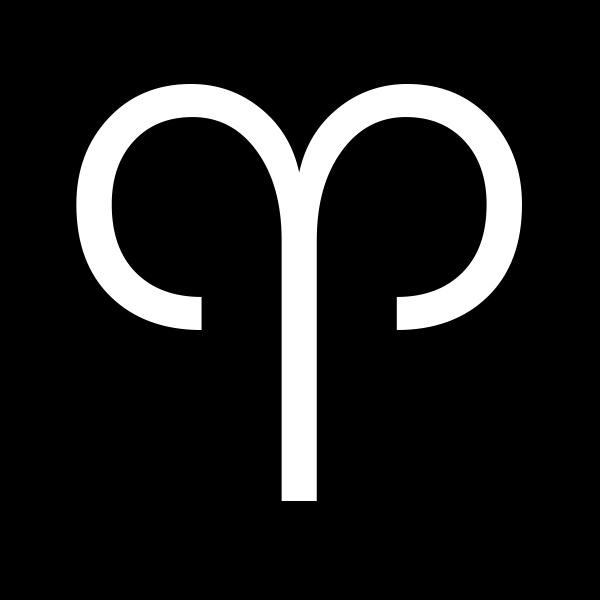
<style>
.page{position:relative;width:600px;height:600px;background:#000000}
.page>*{position:absolute;margin:0}
.t1{font:588px "ArialUnicodeMS";color:#ffffff}
</style>
<div class="page">
<p class="t1" style="left:76px;top:84px;width:446px;height:417px">♈︎</p>
</div>
